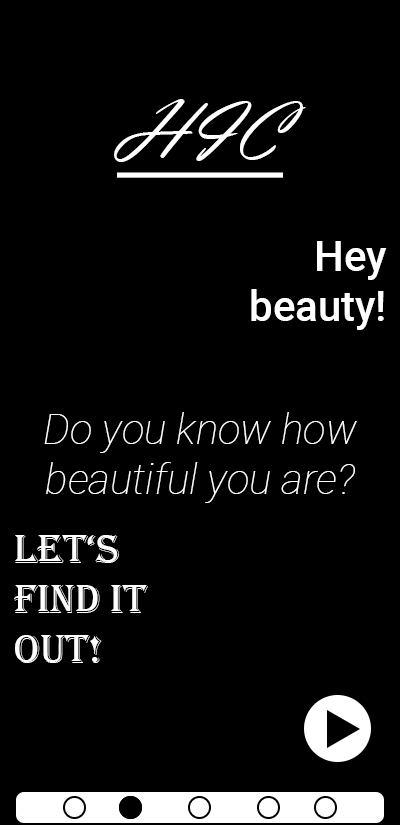
<style>
.page{position:relative;width:400px;height:825px;background:#000000}
.page>*{position:absolute;margin:0}
.t1{font:83.3px "VladimirScript";color:#ffffff;text-decoration:underline}
.t2{font:41.7px "Roboto-Medium";color:#ffffff}
.t3{font:41.7px "Roboto-ThinItalic";color:#ffffff}
.t4{font:41.7px "Algerian";color:#ffffff}
</style>
<div class="page">
<p class="t1" style="left:114px;top:99px;width:192px;height:79px">HIC</p>
<p class="t2" style="left:251px;top:241px;width:136px;height:89px;text-align:right">Hey beauty!</p>
<p class="t3" style="left:44px;top:412px;width:313px;height:91px;text-align:center">Do you know how beautiful you are?</p>
<p class="t4" style="left:14px;top:535px;width:134px;height:128px">LEt‘s find it Out!</p>
</div>
